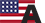
<style>
.page{position:relative;width:45px;height:23px;background:#ffffff}
.page>*{position:absolute;margin:0}
.t1{font:25.9px "Arial-Black";color:#232323}
</style>
<div class="page">
<p class="t1" style="left:21px;top:4px;width:21px;height:19px">A</p>
</div>
